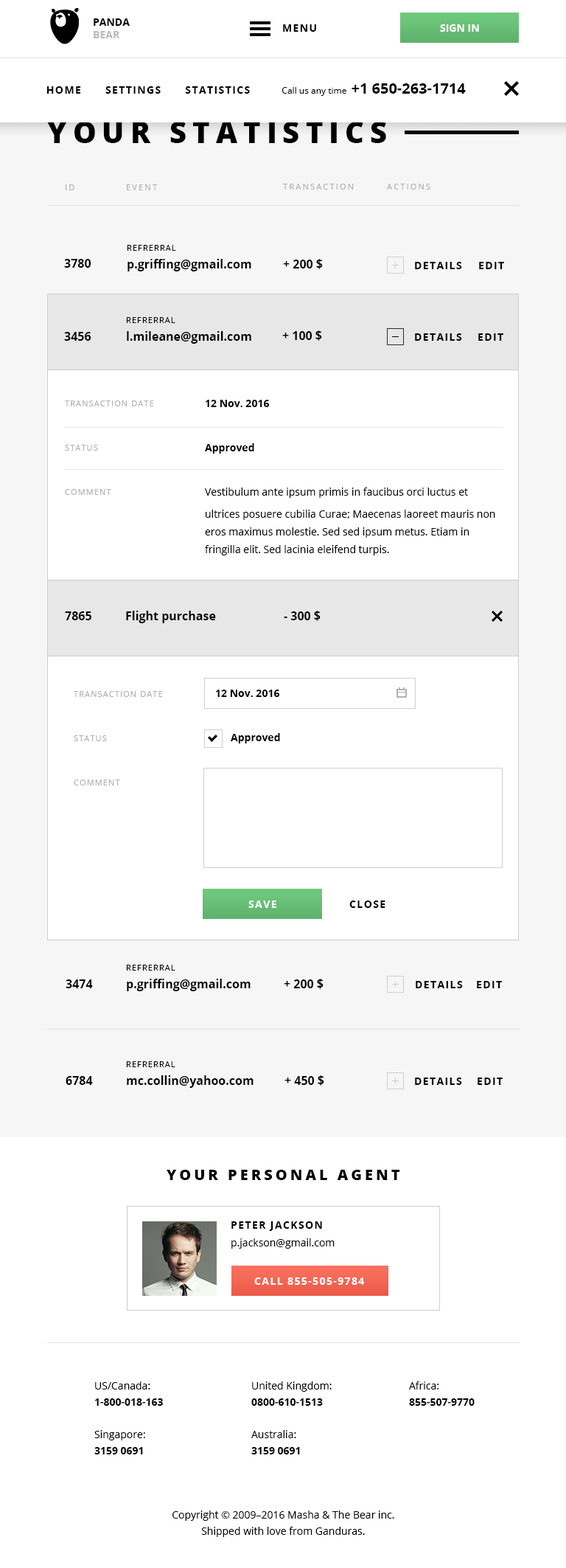
<style>
.page{position:relative;width:566px;height:1568px;background:#ffffff}
.page>*{position:absolute;margin:0}
.t1{font:10.3px/12.5px "OpenSans-Bold";color:#000000;text-transform:uppercase}
.t2{font:10.3px/12.5px "OpenSans-Bold";color:#bcbcbc;text-transform:uppercase}
.t3{font:10.3px "OpenSans-Bold";letter-spacing:0.1em;color:#000000;text-transform:uppercase}
.t4{font:10.3px "OpenSans-Bold";color:#ffffff;text-transform:uppercase}
.t5{font:8.9px "OpenSans";color:#000000}
.t6{font:14.8px "OpenSans-Bold";color:#000000;text-transform:uppercase}
.t7{font:29.5px "OpenSans-Extrabold";letter-spacing:0.2em;color:#000000;text-transform:uppercase}
.t8{font:8.1px "OpenSans";letter-spacing:0.2em;color:#b0b0b0;text-transform:uppercase}
.t9{font:11.8px/17.7px "OpenSans-Bold";color:#000000}
.t10{font:8.1px/17.7px "OpenSans";letter-spacing:0.1em;color:#000000;text-transform:uppercase}
.t11{font:11.8px "OpenSans-Bold";color:#000000}
.t12{font:8.1px/44.3px "OpenSans";letter-spacing:0.1em;color:#b0b0b0;text-transform:uppercase}
.t13{font:10.3px/17.7px "OpenSans";color:#000000}
.t14{font:10.3px/44.3px "OpenSans-Bold";letter-spacing:0.001em;color:#000000}
.t15{font:10.3px/44.3px "OpenSans-Bold";color:#000000}
.t16{font:10.3px/22.1px "OpenSans";color:#000000}
.t17{font:10.3px/44.3px "OpenSans";color:#000000}
.t18{font:8.1px "OpenSans";letter-spacing:0.1em;color:#000000;text-transform:uppercase}
.t19{font:10.3px "OpenSans-Bold";letter-spacing:0.001em;color:#000000}
.t20{font:10.3px "OpenSans-Bold";color:#000000}
.t21{font:10.3px "OpenSans-Bold";letter-spacing:0.1em;color:#ffffff;text-transform:uppercase}
.t22{font:14.8px "OpenSans-Extrabold";letter-spacing:0.2em;color:#000000;text-transform:uppercase}
.t23{font:10.3px/17.7px "OpenSans-Bold";letter-spacing:0.1em;color:#000000;text-transform:uppercase}
.t24{font:10.3px/16.2px "OpenSans-Bold";color:#000000}
.t25{font:10.3px/16.2px "OpenSans";color:#000000}
</style>
<div class="page">
<p class="t1" style="left:94px;top:18px;width:36px;height:20px">panda <br><span class="t2">bear</span></p>
<p class="t1" style="left:94px;top:18px;width:36px;height:20px">panda <br><span class="t2">bear</span></p>
<p class="t3" style="left:283px;top:24px;width:33px;height:8px">menu</p>
<p class="t3" style="left:283px;top:24px;width:33px;height:8px">menu</p>
<p class="t4" style="left:440px;top:24px;width:39px;height:8px">sign in</p>
<p class="t4" style="left:440px;top:24px;width:39px;height:8px">sign in</p>
<p class="t3" style="left:46px;top:86px;width:204px;height:8px">home settings statistics</p>
<p class="t5" style="left:282px;top:83px;width:184px;height:13px">Call us any time  <span class="t6">+1 650-263-1714</span></p>
<p class="t7" style="left:47px;top:122px;width:339px;height:21px">Your Statistics</p>
<p class="t8" style="left:66px;top:184px;width:8px;height:6px">id</p>
<p class="t8" style="left:127px;top:184px;width:31px;height:6px">event</p>
<p class="t8" style="left:283px;top:184px;width:71px;height:6px">transaction</p>
<p class="t8" style="left:387px;top:184px;width:44px;height:6px">actions</p>
<p class="t9" style="left:127px;top:245px;width:124px;height:26px"><span class="t10">refrerral<br></span>p.griffing@gmail.com</p>
<p class="t11" style="left:64px;top:259px;width:27px;height:9px">3780</p>
<p class="t11" style="left:283px;top:259px;width:40px;height:10px">+ 200 $</p>
<p class="t3" style="left:415px;top:262px;width:47px;height:7px">details</p>
<p class="t3" style="left:479px;top:262px;width:25px;height:7px">edit</p>
<p class="t9" style="left:126px;top:317px;width:125px;height:27px"><span class="t10">refrerral<br></span>l.mileane@gmail.com</p>
<p class="t11" style="left:64px;top:332px;width:27px;height:9px">3456</p>
<p class="t11" style="left:282px;top:330px;width:40px;height:11px">+ 100 $</p>
<p class="t3" style="left:415px;top:333px;width:47px;height:8px">details</p>
<p class="t3" style="left:479px;top:333px;width:25px;height:8px">edit</p>
<p class="t12" style="left:65px;top:400px;width:89px;height:95px">transaction date<br>status<br>comment</p>
<p class="t13" style="left:205px;top:400px;width:291px;height:155px"><span class="t14">12 Nov. 2016<br></span><span class="t15">Approved<br></span><span class="t16">Vestibulu</span><span class="t17">m ante ipsum primis in faucibus orc</span><span class="t16">i luctus et ultrices posuere </span>cubilia Curae; Maecenas laoreet mauris non eros maximus molestie. Sed sed ipsum metus. Etiam in fringilla elit. Sed lacinia eleifend turpis.</p>
<p class="t11" style="left:65px;top:611px;width:26px;height:9px">7865</p>
<p class="t11" style="left:126px;top:611px;width:90px;height:12px"><span class="t18"><br></span>Flight purchase</p>
<p class="t11" style="left:284px;top:611px;width:37px;height:10px">- 300 $</p>
<p class="t19" style="left:216px;top:690px;width:64px;height:7px">12 Nov. 2016</p>
<p class="t12" style="left:74px;top:691px;width:89px;height:94px">transaction date<br>status<br>comment</p>
<p class="t20" style="left:231px;top:733px;width:49px;height:10px">Approved</p>
<p class="t21" style="left:249px;top:901px;width:28px;height:7px">save</p>
<p class="t3" style="left:350px;top:901px;width:36px;height:7px">close</p>
<p class="t9" style="left:126px;top:965px;width:125px;height:26px"><span class="t10">refrerral<br></span>p.griffing@gmail.com</p>
<p class="t11" style="left:66px;top:979px;width:27px;height:9px">3474</p>
<p class="t11" style="left:284px;top:979px;width:40px;height:10px">+ 200 $</p>
<p class="t3" style="left:416px;top:981px;width:47px;height:7px">details</p>
<p class="t3" style="left:477px;top:981px;width:25px;height:7px">edit</p>
<p class="t9" style="left:126px;top:1061px;width:128px;height:27px"><span class="t10">refrerral<br></span>mc.collin@yahoo.com</p>
<p class="t11" style="left:66px;top:1076px;width:27px;height:9px">6784</p>
<p class="t11" style="left:285px;top:1075px;width:40px;height:11px">+ 450 $</p>
<p class="t3" style="left:415px;top:1078px;width:47px;height:7px">details</p>
<p class="t3" style="left:478px;top:1078px;width:25px;height:7px">edit</p>
<p class="t22" style="left:167px;top:1170px;width:233px;height:10px">Your personal agent</p>
<p class="t13" style="left:232px;top:1221px;width:103px;height:28px"><span class="t23">Peter Jackson<br></span>p.jackson@gmail.com</p>
<p class="t21" style="left:254px;top:1277px;width:111px;height:8px">call 855-505-9784</p>
<p class="t24" style="left:94px;top:1381px;width:69px;height:73px"><span class="t25">US/Canada:<br></span>1-800-018-163<br><br><span class="t25">Singapore:<br></span>3159 0691</p>
<p class="t25" style="left:251px;top:1381px;width:81px;height:73px">United Kingdom:<br><span class="t24">0800-610-1513<br><br></span>Australia:<br><span class="t24">3159 0691</span></p>
<p class="t24" style="left:409px;top:1381px;width:66px;height:25px"><span class="t25">Africa: <br></span>855-507-9770</p>
<p class="t25" style="left:173px;top:1510px;width:222px;height:27px;text-align:center">Copyright © 2009–2016 Masha &amp; The Bear inc. <br>Shipped with love from Ganduras.</p>
</div>
